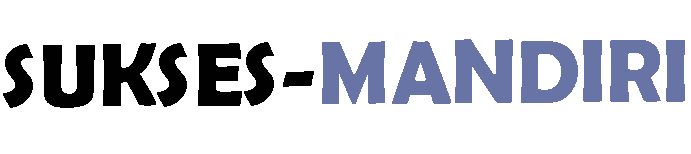
<style>
.page{position:relative;width:691px;height:154px;background:#ffffff}
.page>*{position:absolute;margin:0}
.t1{font:90px "BerlinSansFBDemi-Bold";color:#010101}
.t2{font:90px "BerlinSansFBDemi-Bold";color:#6874a6}
</style>
<div class="page">
<p class="t1" style="left:3px;top:39px;width:682px;height:69px">SUKSES-<span class="t2">MANDIRI</span></p>
</div>
